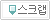
<style>
.page{position:relative;width:50px;height:20px;background:#ffffff}
.page>*{position:absolute;margin:0}
.t1{font:11px "Gulim";letter-spacing:-0.1em;color:#6c6c6c}
</style>
<div class="page">
<p class="t1" style="left:18px;top:5px;width:28px;height:10px">스크랩</p>
</div>
